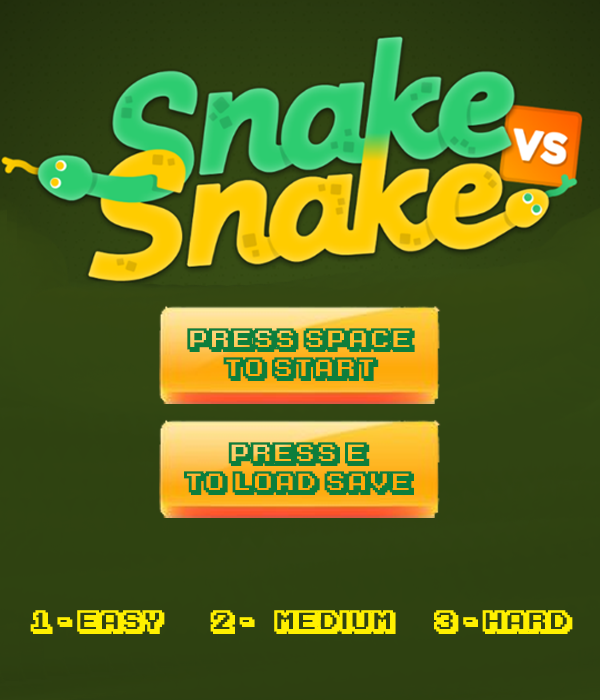
<style>
.page{position:relative;width:600px;height:700px}
.page>*{position:absolute;margin:0}
.t1{font:24px "KarmaticArcade";color:#0d7e3c;font-weight:bold}
.t2{font:24px "KarmaticArcade";color:#fff000;font-weight:bold}
</style>
<div class="page">
<p class="t1" style="left:187px;top:328px;width:228px;height:53px;text-align:center">PRESS SPACE<br>tO START</p>
<p class="t1" style="left:184px;top:442px;width:230px;height:53px;text-align:center">PRESS E<br>tO load save</p>
<p class="t2" style="left:30px;top:610px;width:543px;height:24px">1 - Easy  2 - &lt;Medium  3 - Hard</p>
</div>
